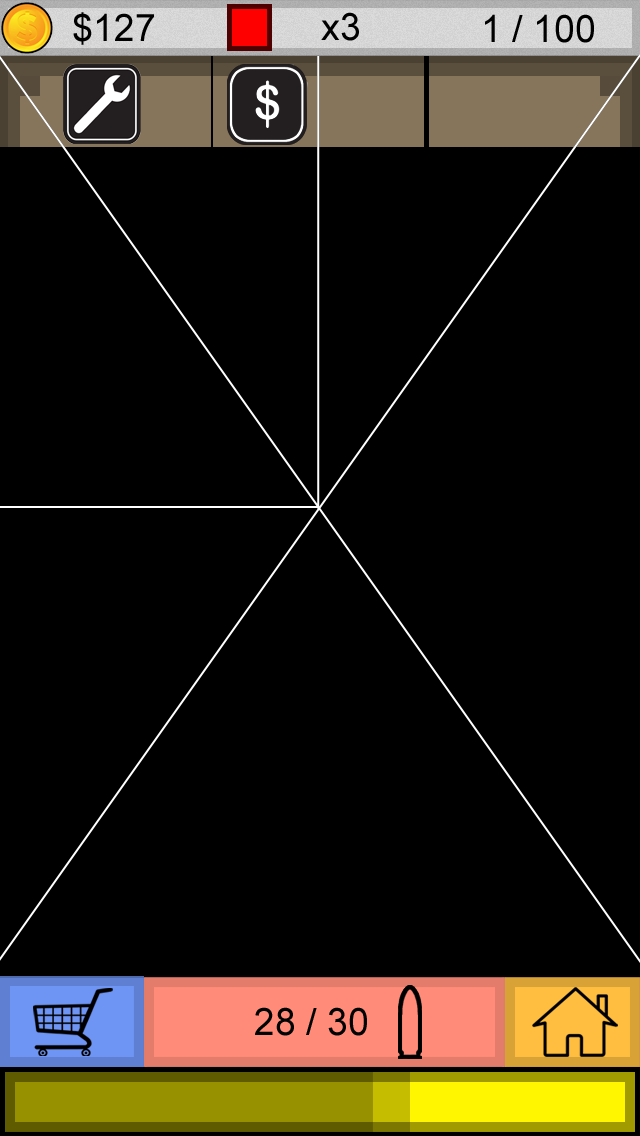
<style>
.page{position:relative;width:640px;height:1136px;background:#000000}
.page>*{position:absolute;margin:0}
.t1{font:37.5px "ArialMT";color:#000000}
</style>
<div class="page">
<p class="t1" style="left:73px;top:12px;width:81px;height:33px">$127</p>
<p class="t1" style="left:321px;top:12px;width:38px;height:29px">x3</p>
<p class="t1" style="left:485px;top:14px;width:109px;height:29px">1 / 100</p>
<p class="t1" style="left:255px;top:1007px;width:112px;height:29px">28 / 30</p>
</div>
